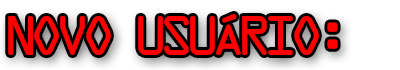
<style>
.page{position:relative;width:400px;height:70px;background:#ffffff}
.page>*{position:absolute;margin:0}
.t1{font:50px "OCRAStd";letter-spacing:-0.2em;color:#ff0000}
</style>
<div class="page">
<p class="t1" style="left:8px;top:14px;width:330px;height:41px">NOVO USUÁRIO:</p>
</div>
